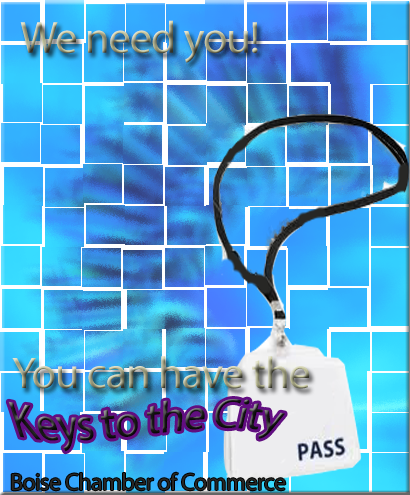
<style>
.page{position:relative;width:410px;height:495px}
.page>*{position:absolute;margin:0}
.t1{font:45.1px "MyriadPro-Regular";letter-spacing:-0.025em}
.t2{font:44.6px "MyriadPro-Regular";letter-spacing:-0.025em}
.t3{font:24px "MyriadPro-Regular";letter-spacing:-0.025em;color:#272725}
</style>
<div class="page">
<p class="t1" style="left:20px;top:20px;width:238px;height:43px">We need you!</p>
<p class="t2" style="left:12px;top:356px;width:298px;height:33px">You can have the</p>
<p class="t2" style="left:8px;top:399px;width:277px;height:53px">Keys to the City</p>
<p class="t3" style="left:11px;top:472px;width:275px;height:19px">Boise Chamber of Commerce</p>
</div>
